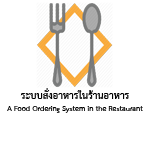
<style>
.page{position:relative;width:150px;height:150px;background:#ffffff}
.page>*{position:absolute;margin:0}
.t1{font:10px "THSarabunPSK-Bold";color:#000000}
.t2{font:14px "THSarabunPSK-Bold";color:#000000}
</style>
<div class="page">
<p class="t1" style="left:7px;top:88px;width:136px;height:25px;text-align:center"><span class="t2">ระบบสั่งอาหารในร้านอาหาร<br></span>A Food Ordering System in the Restaurant</p>
</div>
